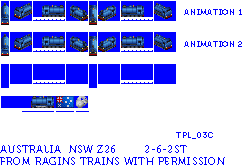
<style>
.page{position:relative;width:250px;height:168px;background:#ffffff}
.page>*{position:absolute;margin:0}
.t1{font:8px "Museo700-Regular";letter-spacing:0.075em;color:#0000ff;text-transform:uppercase}
.t2{font:10px "Museo700-Regular";letter-spacing:0.075em;color:#0000ff;text-transform:uppercase}
</style>
<div class="page">
<p class="t1" style="left:184px;top:9px;width:58px;height:6px">Animation 1</p>
<p class="t1" style="left:184px;top:41px;width:58px;height:6px">Animation 2</p>
<p class="t1" style="left:176px;top:132px;width:37px;height:7px">tpl_03c</p>
<p class="t2" style="left:0px;top:145px;width:225px;height:20px">australia  nsw z26 2-6-2ST<br>from ragins trains with permission</p>
</div>
